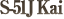
<style>
.page{position:relative;width:64px;height:19px;background:#ffffff}
.page>*{position:absolute;margin:0}
.t1{font:18px "RyuminPro-ExBold";letter-spacing:-0.1em;color:#4a3f32;font-weight:bold;scale:0.9 1}
</style>
<div class="page">
<p class="t1" style="left:0px;top:0px;width:63px;height:18px">S-51J Kai</p>
</div>
